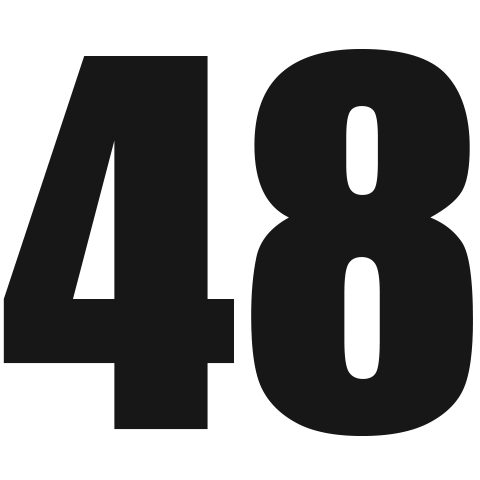
<style>
.page{position:relative;width:480px;height:480px;background:#171717}
.page>*{position:absolute;margin:0}
.t1{font:472.3px "Impact";color:#171717}
</style>
<div class="page">
<p class="t1" style="left:3px;top:49px;width:470px;height:387px">48</p>
</div>
